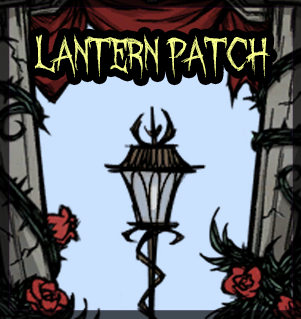
<style>
.page{position:relative;width:301px;height:319px;background:#cbe2ff}
.page>*{position:absolute;margin:0}
.t1{font:40px "OctoberCrow";color:#f8ff8d}
</style>
<div class="page">
<p class="t1" style="left:34px;top:34px;width:236px;height:45px">Lantern Patch</p>
</div>
